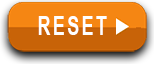
<style>
.page{position:relative;width:154px;height:64px;background:#f58613}
.page>*{position:absolute;margin:0}
.t1{font:25.6px "ArialNarrow-Bold";letter-spacing:0.12em;color:#ffffff;scale:0.84 1}
</style>
<div class="page">
<p class="t1" style="left:38px;top:16px;width:69px;height:19px">RESET</p>
</div>
